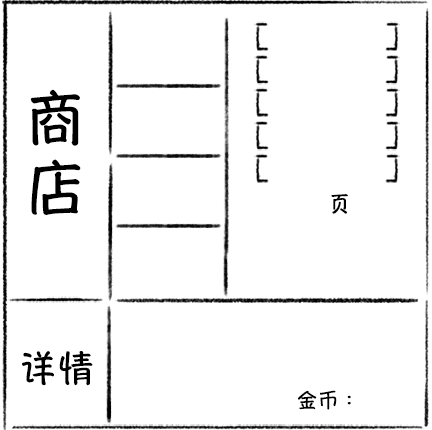
<style>
.page{position:relative;width:432px;height:430px;background:#ffffff}
.page>*{position:absolute;margin:0}
.t1{font:60px/1125.5px "HannotateSC-W7";letter-spacing:0.055em;color:#000000}
.t2{font:36px "HannotateSC-W7";letter-spacing:0.055em;color:#000000}
.t3{font:20px "HannotateSC-W7";letter-spacing:0.055em;color:#000000}
</style>
<div class="page">
<p class="t1" style="left:30px;top:89px;width:51px;height:127px">商店</p>
<p class="t2" style="left:22px;top:351px;width:71px;height:35px">详情</p>
<p class="t3" style="left:298px;top:390px;width:53px;height:20px">金币：</p>
</div>
